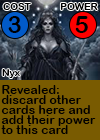
<style>
.page{position:relative;width:100px;height:140px;background:#795b01}
.page>*{position:absolute;margin:0}
.t1{font:9.7px "ArialRoundedMTBold";letter-spacing:0.01em;color:#000000}
.t2{font:24px "ArialRoundedMTBold";letter-spacing:0.01em;color:#000000}
.t3{font:24px "ArialRoundedMTBold";letter-spacing:-0.1em;color:#000000}
.t4{font:12px/10px "ArialRoundedMTBold";letter-spacing:0.01em;color:#000000}
</style>
<div class="page">
<p class="t1" style="left:3px;top:3px;width:28px;height:7px">COST</p>
<p class="t1" style="left:60px;top:3px;width:38px;height:7px">POWER</p>
<p class="t2" style="left:8px;top:16px;width:13px;height:17px">3</p>
<p class="t3" style="left:75px;top:16px;width:13px;height:17px">5</p>
<p class="t1" style="left:2px;top:69px;width:18px;height:9px">Nyx</p>
<p class="t4" style="left:1px;top:85px;width:95px;height:49px">Revealed: <br>discard other <br>cards here and<br>add their power<br>to this card</p>
</div>
